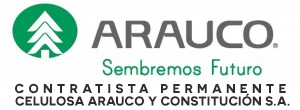
<style>
.page{position:relative;width:300px;height:110px;background:#ffffff}
.page>*{position:absolute;margin:0}
.t1{font:13px "Novecentosanswide-Bold";letter-spacing:0.32em;color:#2e2e2e;text-transform:uppercase}
.t2{font:13px "Novecentosanswide-Bold";color:#2e2e2e;text-transform:uppercase}
</style>
<div class="page">
<p class="t1" style="left:15px;top:83px;width:271px;height:11px">CONTRATISTA PERMANENTE</p>
<p class="t2" style="left:15px;top:93px;width:275px;height:13px">CELULOSA ARAUCO Y CONSTITUCIÓN S.A.</p>
</div>
